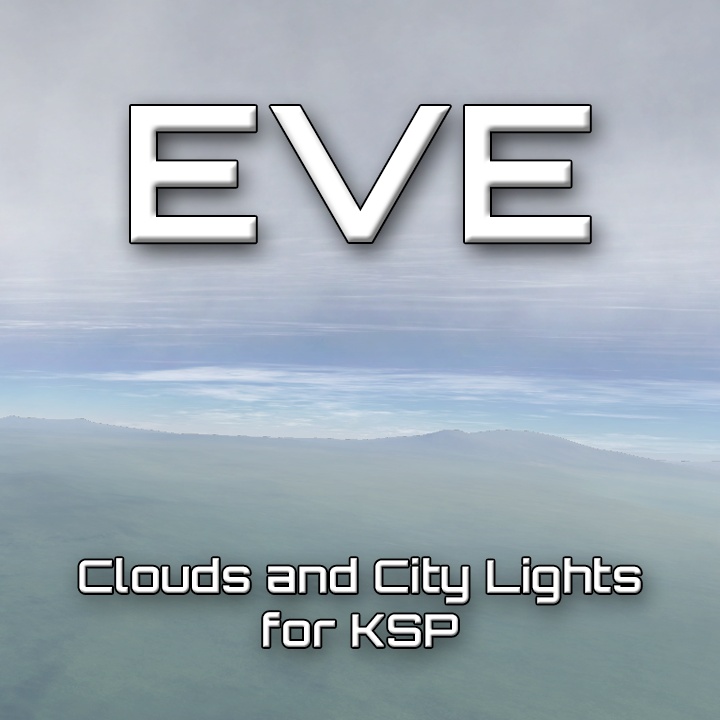
<style>
.page{position:relative;width:720px;height:720px}
.page>*{position:absolute;margin:0}
.t1{font:188.5px "Orbitron-Bold";color:#ffffff}
.t2{font:45.2px "Orbitron-Bold";color:#ffffff}
</style>
<div class="page">
<p class="t1" style="left:131px;top:106px;width:459px;height:137px">EVE</p>
<p class="t2" style="left:79px;top:558px;width:562px;height:89px;text-align:center">Clouds and City Lights<br>for KSP</p>
</div>
